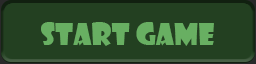
<style>
.page{position:relative;width:256px;height:64px;background:#234021}
.page>*{position:absolute;margin:0}
.t1{font:29.3px "ShowcardGothic-Reg";color:#68af62}
</style>
<div class="page">
<p class="t1" style="left:41px;top:20px;width:173px;height:24px">START GAME</p>
<p class="t1" style="left:41px;top:22px;width:173px;height:24px">START GAME</p>
</div>
